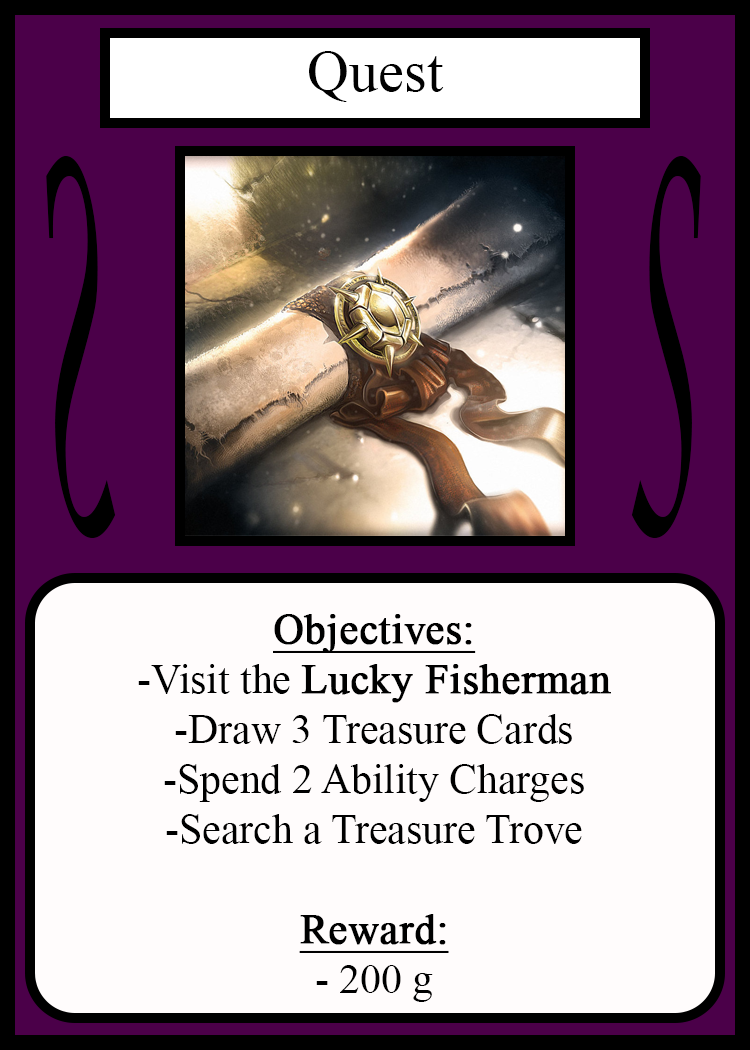
<style>
.page{position:relative;width:750px;height:1050px;background:#fffcfc}
.page>*{position:absolute;margin:0}
.t1{font:58.3px "TimesNewRomanPSMT";color:#010101}
.t2{font:504.3px "LucidaCalligraphy-Italic";color:#000000;scale:0.24 1}
.t3{font:504.1px "LucidaCalligraphy-Italic";color:#000000;scale:0.24 1}
.t4{font:41.7px "TimesNewRomanPSMT";color:#000000}
.t5{font:41.7px "TimesNewRomanPSMT";color:#000000;font-weight:bold;text-decoration:underline}
.t6{font:41.7px "TimesNewRomanPSMT";color:#000000;font-weight:bold}
</style>
<div class="page">
<p class="t1" style="left:309px;top:51px;width:135px;height:51px">Quest</p>
<p class="t2" style="left:46px;top:156px;width:70px;height:382px;rotate:180deg">S</p>
<p class="t3" style="left:631px;top:156px;width:70px;height:382px">S</p>
<p class="t4" style="left:138px;top:614px;width:473px;height:388px;text-align:center"><span class="t5">Objectives:<br></span>-Visit the <span class="t6">Lucky Fisherman<br></span>-Draw 3 Treasure Cards<br>-Spend 2 Ability Charges<br>-Search a Treasure Trove<br><br><span class="t5">Reward:</span><br>- 200 g</p>
</div>
